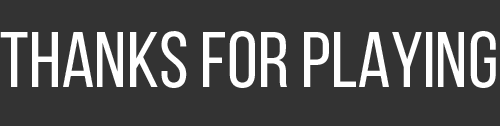
<style>
.page{position:relative;width:500px;height:126px;background:#333333}
.page>*{position:absolute;margin:0}
.t1{font:79px "BebasNeueRegular";color:#ffffff}
</style>
<div class="page">
<p class="t1" style="left:0px;top:31px;width:496px;height:57px">THANKS FOR PLAYING</p>
</div>
